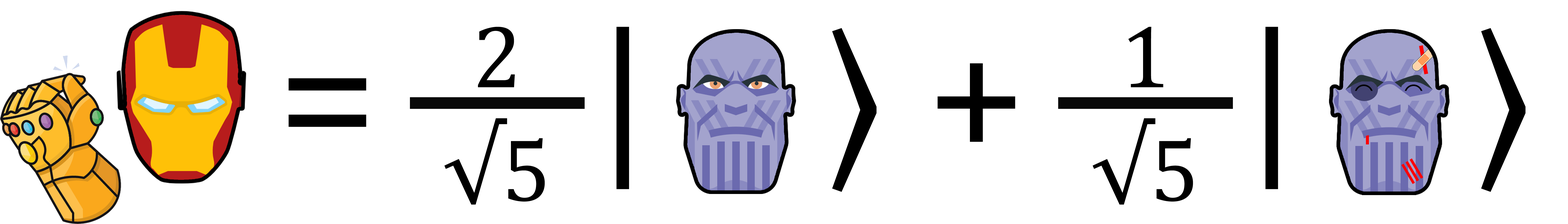
<style>
.page{position:relative;width:1568px;height:224px;background:#ffffff}
.page>*{position:absolute;margin:0}
.t1{font:179.2px "Cambria";color:#000000}
.t2{font:179.2px "SitkaSmall-Italic";color:#000000}
.t3{font:89.6px "Cambria";color:#000000}
</style>
<div class="page">
<p class="t1" style="left:289px;top:27px;width:1237px;height:165px">=     <span class="t2">|</span>    ⟩ +     <span class="t2">|</span>    ⟩</p>
<p class="t3" style="left:478px;top:27px;width:37px;height:60px">2</p>
<p class="t3" style="left:1128px;top:27px;width:35px;height:60px">1</p>
<p class="t3" style="left:444px;top:118px;width:101px;height:87px">√5</p>
<p class="t3" style="left:1093px;top:118px;width:100px;height:87px">√5</p>
</div>
